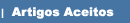
<style>
.page{position:relative;width:130px;height:23px;background:#4775a3}
.page>*{position:absolute;margin:0}
.t1{font:12px "Arial-Black";color:#fffeff}
.t2{font:10px "Arial-Black";color:#fffeff}
</style>
<div class="page">
<p class="t1" style="left:1px;top:7px;width:113px;height:12px"><span class="t2">|</span>  Artigos Aceitos</p>
</div>
